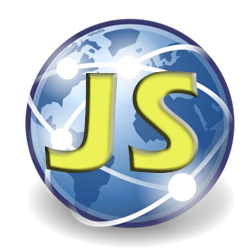
<style>
.page{position:relative;width:252px;height:252px;background:#ffffff}
.page>*{position:absolute;margin:0}
.t1{font:146.7px "ErasITC-Bold"}
</style>
<div class="page">
<p class="t1" style="left:44px;top:71px;width:155px;height:102px">JS</p>
</div>
